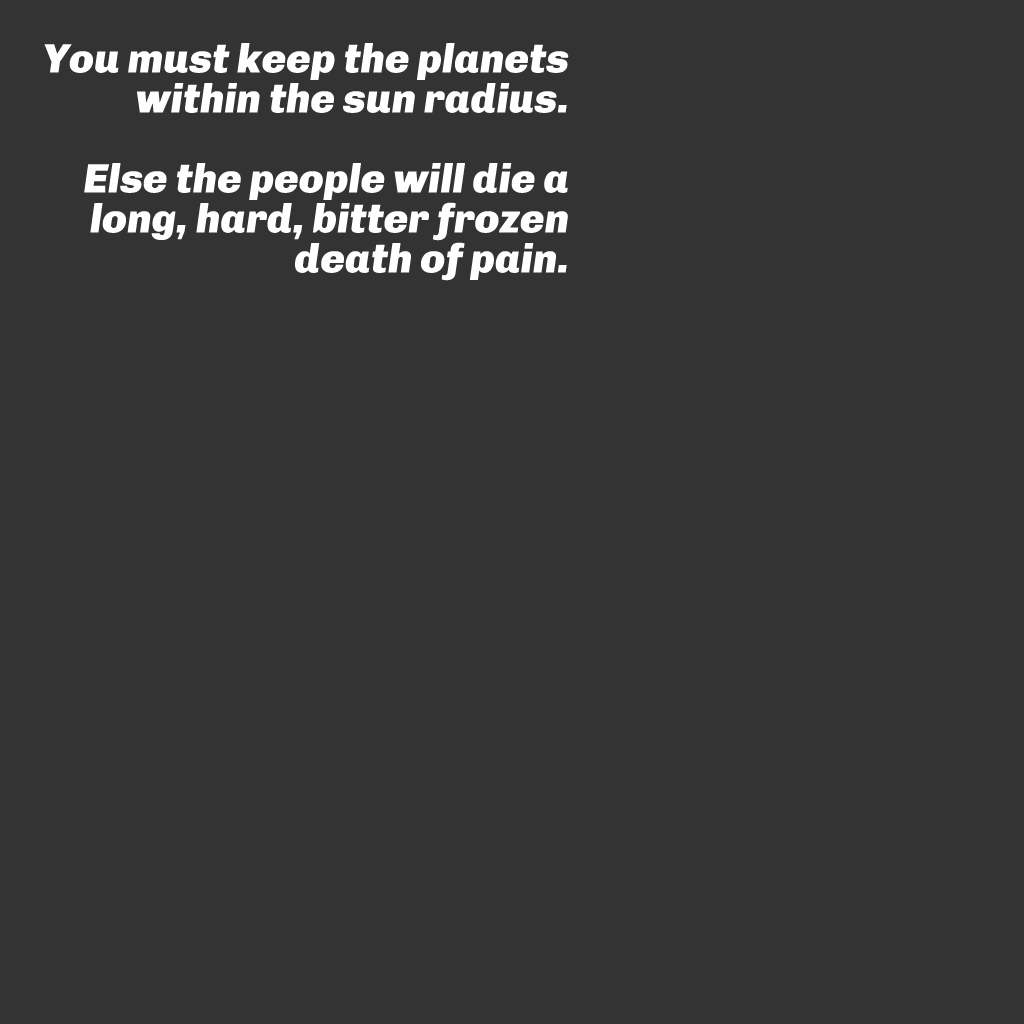
<style>
.page{position:relative;width:1024px;height:1024px;background:#333333}
.page>*{position:absolute;margin:0}
.t1{font:41px/40px "Chivo-BlackItalic";color:#ffffff}
</style>
<div class="page">
<p class="t1" style="left:44px;top:43px;width:525px;height:238px;text-align:right">You must keep the planets within the sun radius. <br><br>    Else the people will die a<br>  long, hard, bitter frozen death of pain.</p>
</div>
